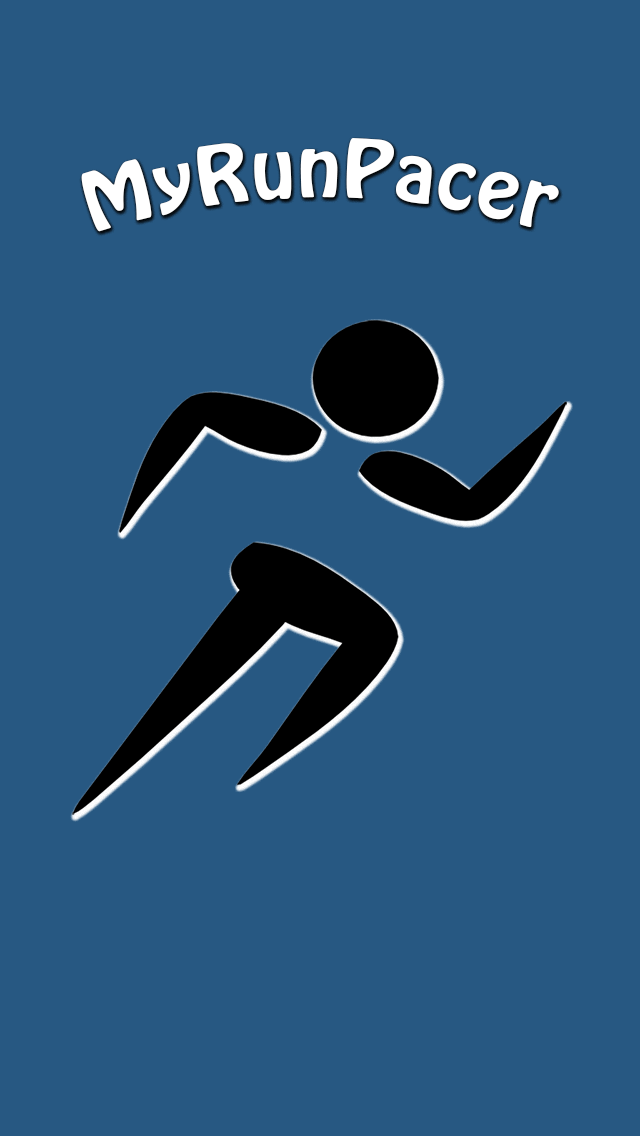
<style>
.page{position:relative;width:640px;height:1136px;background:#275882}
.page>*{position:absolute;margin:0}
.t1{font:72px "HoboStd";letter-spacing:0.04em;color:#ffffff}
</style>
<div class="page">
<p class="t1" style="left:81px;top:138px;width:478px;height:94px">MyRunPacer</p>
</div>
